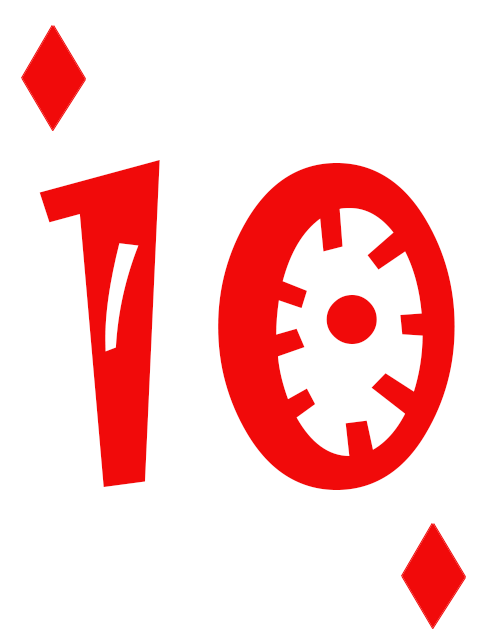
<style>
.page{position:relative;width:480px;height:640px;background:#ffffff}
.page>*{position:absolute;margin:0}
.t1{font:386.3px "Jokerman-Regular";color:#f10a0a}
</style>
<div class="page">
<p class="t1" style="left:39px;top:160px;width:416px;height:330px">10</p>
</div>
